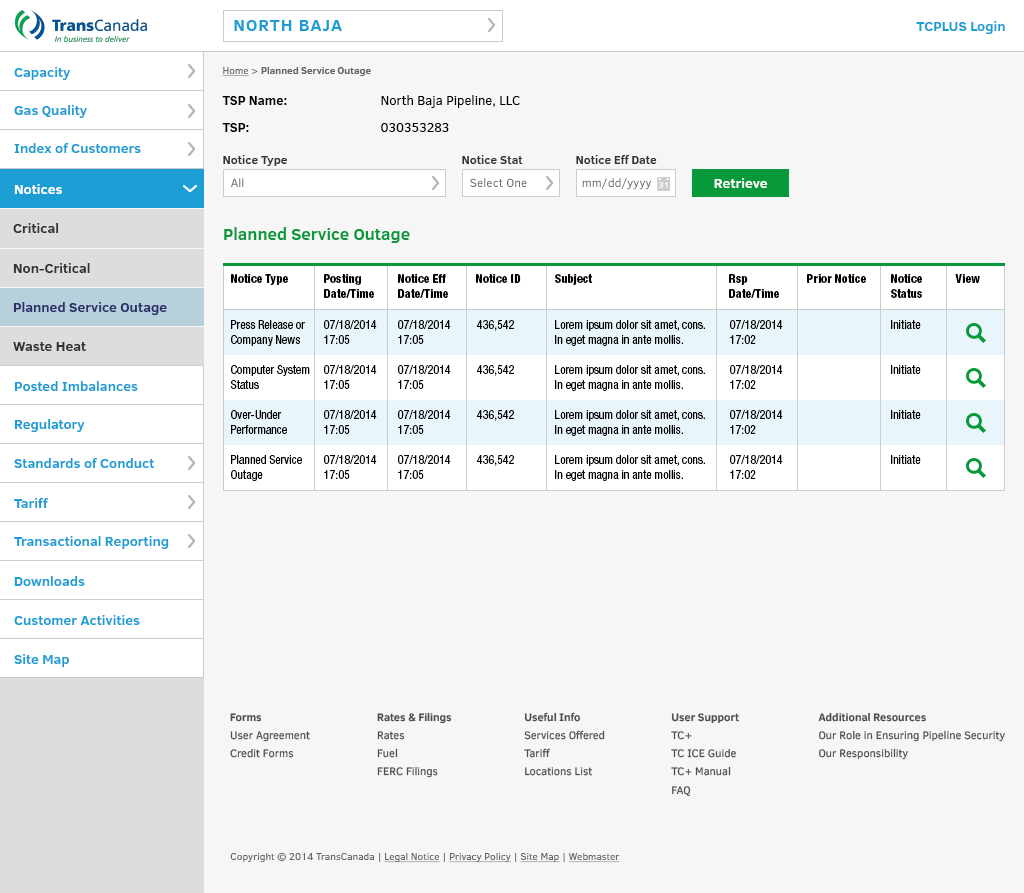
<style>
.page{position:relative;width:1024px;height:893px;background:#f6f6f7}
.page>*{position:absolute;margin:0}
.t1{font:17px "ClearSans-Bold";letter-spacing:0.06em;color:#1c9ed5}
.t2{font:14px "ClearSans-Bold";color:#1c9ed5}
.t3{font:10px "ClearSans-Bold";color:#666666}
.t4{font:10px "ClearSans";color:#666666;text-decoration:underline}
.t5{font:10px "ClearSans";color:#666666}
.t6{font:13px/27px "ClearSans-Bold";color:#000000}
.t7{font:13px/27px "ClearSans";color:#000000}
.t8{font:12px "ClearSans-Bold";color:#333333}
.t9{font:14px "ClearSans-Bold";color:#ffffff}
.t10{font:12px "ClearSans";color:#666666}
.t11{font:14px "ClearSans-Bold";color:#333333}
.t12{font:17px "ClearSans-Bold";color:#07993a}
.t13{font:12px "HelveticaNeueLTStd-HvCn";color:#000000}
.t14{font:14px "ClearSans-Bold";color:#2e3069}
.t15{font:12px "HelveticaNeueLTStd-Cn";color:#000000}
</style>
<div class="page">
<p class="t1" style="left:234px;top:20px;width:108px;height:11px">NORTH BAJA</p>
<p class="t2" style="left:916px;top:21px;width:89px;height:13px">TCPLUS Login</p>
<p class="t2" style="left:14px;top:67px;width:57px;height:13px">Capacity</p>
<p class="t3" style="left:222px;top:67px;width:149px;height:9px"><span class="t4">Home</span><span class="t5"> &gt; </span>Planned Service Outage</p>
<p class="t6" style="left:222px;top:96px;width:65px;height:36px">TSP Name:<br>TSP:</p>
<p class="t7" style="left:381px;top:95px;width:139px;height:37px">North Baja Pipeline, LLC<br>030353283</p>
<p class="t2" style="left:14px;top:105px;width:73px;height:13px">Gas Quality</p>
<p class="t2" style="left:14px;top:143px;width:127px;height:10px">Index of Customers</p>
<p class="t8" style="left:223px;top:155px;width:64px;height:12px">Notice Type</p>
<p class="t8" style="left:462px;top:155px;width:61px;height:9px">Notice Stat</p>
<p class="t8" style="left:576px;top:154px;width:81px;height:10px">Notice Eff Date</p>
<p class="t9" style="left:14px;top:184px;width:48px;height:10px">Notices</p>
<p class="t10" style="left:231px;top:178px;width:13px;height:9px">All</p>
<p class="t10" style="left:470px;top:178px;width:57px;height:9px">Select One</p>
<p class="t10" style="left:582px;top:178px;width:70px;height:12px">mm/dd/yyyy</p>
<p class="t9" style="left:714px;top:178px;width:54px;height:10px">Retrieve</p>
<p class="t11" style="left:13px;top:223px;width:46px;height:10px">Critical</p>
<p class="t12" style="left:224px;top:227px;width:186px;height:16px">Planned Service Outage</p>
<p class="t11" style="left:13px;top:263px;width:77px;height:10px">Non-Critical</p>
<p class="t13" style="left:231px;top:274px;width:57px;height:11px">Notice Type</p>
<p class="t13" style="left:324px;top:274px;width:50px;height:24px">Posting <br>Date/Time</p>
<p class="t13" style="left:398px;top:274px;width:50px;height:24px">Notice Eff<br>Date/Time</p>
<p class="t13" style="left:476px;top:274px;width:45px;height:9px">Notice ID</p>
<p class="t13" style="left:555px;top:274px;width:38px;height:11px">Subject</p>
<p class="t13" style="left:729px;top:274px;width:50px;height:24px">Rsp <br>Date/Time</p>
<p class="t13" style="left:807px;top:274px;width:59px;height:9px">Prior Notice</p>
<p class="t13" style="left:891px;top:274px;width:31px;height:24px">Notice<br>Status</p>
<p class="t13" style="left:955px;top:274px;width:25px;height:9px">View</p>
<p class="t14" style="left:13px;top:302px;width:154px;height:13px">Planned Service Outage</p>
<p class="t15" style="left:231px;top:320px;width:74px;height:26px">Press Release or<br>Company News</p>
<p class="t15" style="left:324px;top:320px;width:53px;height:24px">07/18/2014<br>17:05</p>
<p class="t15" style="left:398px;top:320px;width:53px;height:24px">07/18/2014<br>17:05</p>
<p class="t15" style="left:476px;top:320px;width:38px;height:11px">436,542</p>
<p class="t15" style="left:555px;top:320px;width:150px;height:26px">Lorem ipsum dolor sit amet, cons.<br>In eget magna in ante mollis.</p>
<p class="t15" style="left:730px;top:320px;width:53px;height:24px">07/18/2014<br>17:02</p>
<p class="t15" style="left:891px;top:320px;width:30px;height:9px">Initiate</p>
<p class="t11" style="left:13px;top:342px;width:73px;height:9px">Waste Heat</p>
<p class="t15" style="left:231px;top:365px;width:79px;height:24px">Computer System<br>Status</p>
<p class="t15" style="left:324px;top:365px;width:53px;height:24px">07/18/2014<br>17:05</p>
<p class="t15" style="left:398px;top:365px;width:53px;height:24px">07/18/2014<br>17:05</p>
<p class="t15" style="left:476px;top:365px;width:38px;height:11px">436,542</p>
<p class="t15" style="left:555px;top:365px;width:150px;height:26px">Lorem ipsum dolor sit amet, cons.<br>In eget magna in ante mollis.</p>
<p class="t15" style="left:730px;top:365px;width:53px;height:24px">07/18/2014<br>17:02</p>
<p class="t15" style="left:891px;top:365px;width:30px;height:9px">Initiate</p>
<p class="t2" style="left:14px;top:381px;width:124px;height:10px">Posted Imbalances</p>
<p class="t15" style="left:231px;top:410px;width:56px;height:24px">Over-Under<br>Performance</p>
<p class="t15" style="left:324px;top:410px;width:53px;height:24px">07/18/2014<br>17:05</p>
<p class="t15" style="left:398px;top:410px;width:53px;height:24px">07/18/2014<br>17:05</p>
<p class="t15" style="left:476px;top:410px;width:38px;height:11px">436,542</p>
<p class="t15" style="left:555px;top:410px;width:150px;height:26px">Lorem ipsum dolor sit amet, cons.<br>In eget magna in ante mollis.</p>
<p class="t15" style="left:730px;top:410px;width:53px;height:24px">07/18/2014<br>17:02</p>
<p class="t15" style="left:891px;top:410px;width:30px;height:9px">Initiate</p>
<p class="t2" style="left:14px;top:419px;width:71px;height:13px">Regulatory</p>
<p class="t2" style="left:14px;top:458px;width:141px;height:10px">Standards of Conduct</p>
<p class="t15" style="left:231px;top:455px;width:71px;height:26px">Planned Service<br>Outage</p>
<p class="t15" style="left:324px;top:455px;width:53px;height:24px">07/18/2014<br>17:05</p>
<p class="t15" style="left:398px;top:455px;width:53px;height:24px">07/18/2014<br>17:05</p>
<p class="t15" style="left:476px;top:455px;width:38px;height:11px">436,542</p>
<p class="t15" style="left:555px;top:455px;width:150px;height:26px">Lorem ipsum dolor sit amet, cons.<br>In eget magna in ante mollis.</p>
<p class="t15" style="left:730px;top:455px;width:53px;height:24px">07/18/2014<br>17:02</p>
<p class="t15" style="left:891px;top:455px;width:30px;height:9px">Initiate</p>
<p class="t2" style="left:14px;top:498px;width:35px;height:10px">Tariff</p>
<p class="t2" style="left:14px;top:536px;width:155px;height:13px">Transactional Reporting</p>
<p class="t2" style="left:14px;top:576px;width:71px;height:10px">Downloads</p>
<p class="t2" style="left:14px;top:615px;width:126px;height:10px">Customer Activities</p>
<p class="t2" style="left:14px;top:654px;width:55px;height:13px">Site Map</p>
<p class="t5" style="left:230px;top:852px;width:390px;height:11px">Copyright © 2014 TransCanada | <span class="t4">Legal Notice</span> | <span class="t4">Privacy Policy</span> | <span class="t4">Site Map</span> | <span class="t4">Webmaster</span></p>
</div>
